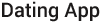
<style>
.page{position:relative;width:100px;height:23px;background:#ffffff}
.page>*{position:absolute;margin:0}
.t1{font:20px "Roboto-Medium";color:#1c1a1a}
</style>
<div class="page">
<p class="t1" style="left:2px;top:1px;width:98px;height:21px">Dating App</p>
</div>
